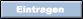
<style>
.page{position:relative;width:83px;height:19px;background:#a7bfdb}
.page>*{position:absolute;margin:0}
.t1{font:9px "Arial-Black";color:#ffffff}
</style>
<div class="page">
<p class="t1" style="left:16px;top:6px;width:48px;height:9px">Eintragen</p>
</div>
